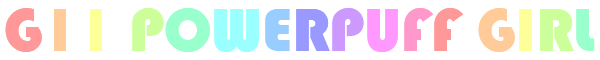
<style>
.page{position:relative;width:600px;height:60px;background:#ffffff}
.page>*{position:absolute;margin:0}
.t1{font:62.5px "Bauhaus93";color:#ff9999}
.t2{font:62.5px "Bauhaus93";color:#ffcc99}
.t3{font:62.5px "Bauhaus93";color:#ffff99}
.t4{font:62.5px "Bauhaus93";color:#ccff99}
.t5{font:62.5px "Bauhaus93";color:#99ffcc}
.t6{font:62.5px "Bauhaus93";color:#99ffff}
.t7{font:62.5px "Bauhaus93";color:#99ccff}
.t8{font:62.5px "Bauhaus93";color:#9999ff}
.t9{font:62.5px "Bauhaus93";color:#cc99ff}
.t10{font:62.5px "Bauhaus93";color:#ff99ff}
.t11{font:62.5px "Bauhaus93";color:#ff99cc}
</style>
<div class="page">
<p class="t1" style="left:5px;top:8px;width:590px;height:44px">G<span class="t2">1</span><span class="t3">1 </span><span class="t4">P</span><span class="t5">O</span><span class="t6">W</span><span class="t7">E</span><span class="t8">R</span><span class="t9">P</span><span class="t10">U</span><span class="t11">F</span>F <span class="t2">G</span><span class="t3">I</span><span class="t4">R</span><span class="t5">L</span></p>
<p class="t1" style="left:5px;top:8px;width:590px;height:44px">G<span class="t2">1</span><span class="t3">1 </span><span class="t4">P</span><span class="t5">O</span><span class="t6">W</span><span class="t7">E</span><span class="t8">R</span><span class="t9">P</span><span class="t10">U</span><span class="t11">F</span>F <span class="t2">G</span><span class="t3">I</span><span class="t4">R</span><span class="t5">L</span></p>
<p class="t1" style="left:5px;top:8px;width:590px;height:44px">G<span class="t2">1</span><span class="t3">1 </span><span class="t4">P</span><span class="t5">O</span><span class="t6">W</span><span class="t7">E</span><span class="t8">R</span><span class="t9">P</span><span class="t10">U</span><span class="t11">F</span>F <span class="t2">G</span><span class="t3">I</span><span class="t4">R</span><span class="t5">L</span></p>
</div>
